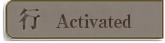
<style>
.page{position:relative;width:165px;height:43px}
.page>*{position:absolute;margin:0}
.t1{font:18px "RyuminPro-ExBold";letter-spacing:-0.04em;color:#48382d}
</style>
<div class="page">
<p class="t1" style="left:56px;top:14px;width:76px;height:14px">Activated</p>
</div>
